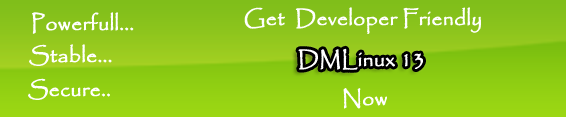
<style>
.page{position:relative;width:566px;height:117px}
.page>*{position:absolute;margin:0}
.t1{font:21px "Papyrus-Regular";color:#ffffff;font-weight:bold}
</style>
<div class="page">
<p class="t1" style="left:32px;top:12px;width:102px;height:22px">Powerfull...</p>
<p class="t1" style="left:244px;top:7px;width:237px;height:27px">Get  Developer Friendly</p>
<p class="t1" style="left:29px;top:44px;width:83px;height:22px">Stable...</p>
<p class="t1" style="left:298px;top:48px;width:125px;height:22px">DMLinux 13</p>
<p class="t1" style="left:28px;top:78px;width:82px;height:22px">Secure..</p>
<p class="t1" style="left:343px;top:88px;width:44px;height:21px">Now</p>
</div>
